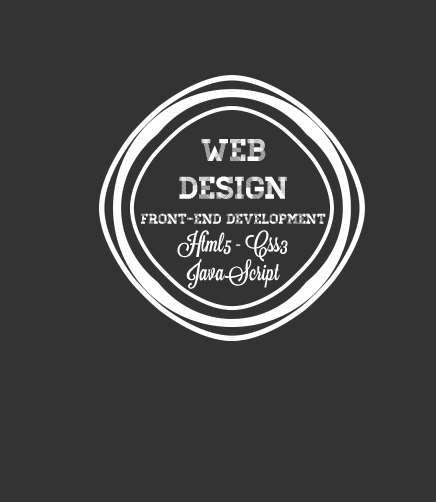
<style>
.page{position:relative;width:436px;height:502px;background:#333333}
.page>*{position:absolute;margin:0}
.t1{font:31.6px "Homestead-Display";color:#ffffff}
.t2{font:14.4px "Homestead-Display";color:#ffffff}
.t3{font:23.9px "Lavanderia-Sturdy";color:#ffffff}
</style>
<div class="page">
<p class="t1" style="left:179px;top:139px;width:108px;height:60px;text-align:center">Web<br>Design</p>
<p class="t2" style="left:141px;top:213px;width:185px;height:11px">Front-End Development</p>
<p class="t3" style="left:177px;top:230px;width:111px;height:59px;text-align:center;rotate:-90deg">Html5 - Css3<br>JavaScript</p>
</div>
